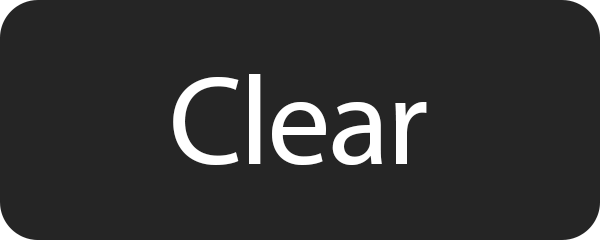
<style>
.page{position:relative;width:600px;height:240px;background:#252525}
.page>*{position:absolute;margin:0}
.t1{font:127px "MyriadPro-Regular";letter-spacing:-0.02em;color:#ffffff}
</style>
<div class="page">
<p class="t1" style="left:173px;top:74px;width:254px;height:91px">Clear</p>
</div>
